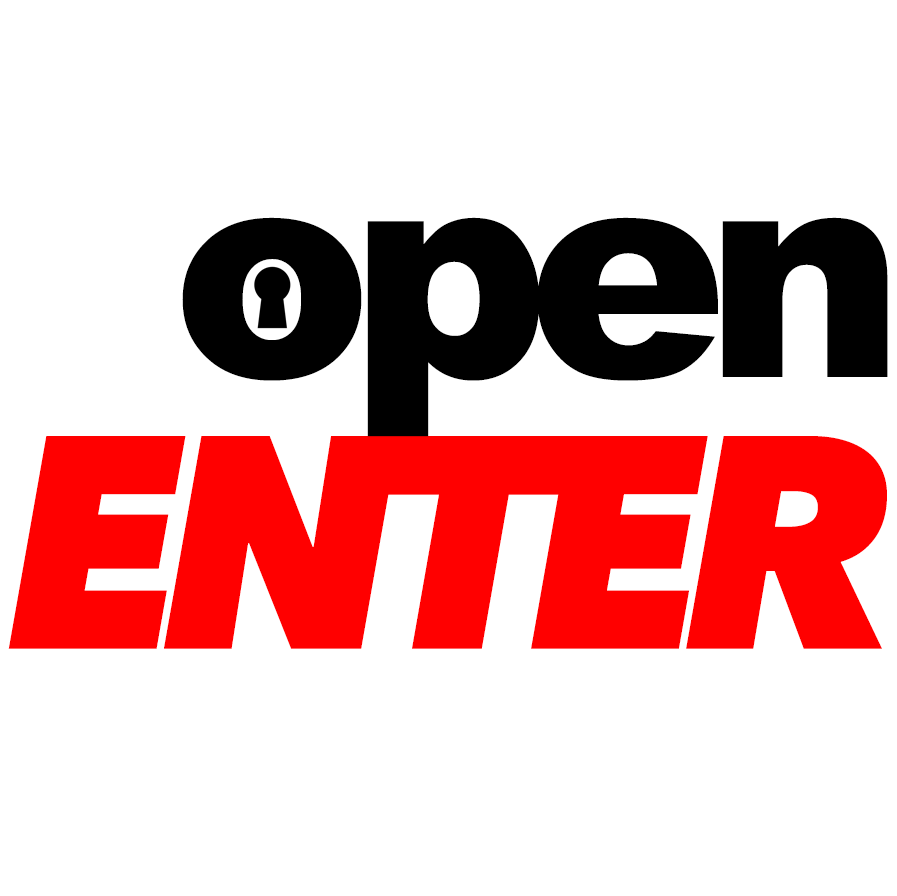
<style>
.page{position:relative;width:897px;height:896px;background:#ffffff}
.page>*{position:absolute;margin:0}
.t1{font:300px "Arial-Black";letter-spacing:-0.075em;color:#000000}
.t2{font:300px "AvenirNext-HeavyItalic";letter-spacing:-0.075em;color:#ff0000}
</style>
<div class="page">
<p class="t1" style="left:182px;top:217px;width:706px;height:220px">open</p>
<p class="t2" style="left:8px;top:436px;width:879px;height:213px">ENTER</p>
</div>
